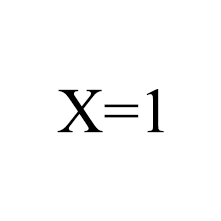
<style>
.page{position:relative;width:221px;height:221px;background:#ffffff}
.page>*{position:absolute;margin:0}
.t1{font:63.9px "TimesNewRomanPSMT";color:#000000}
</style>
<div class="page">
<p class="t1" style="left:57px;top:89px;width:107px;height:44px">X=1</p>
</div>
